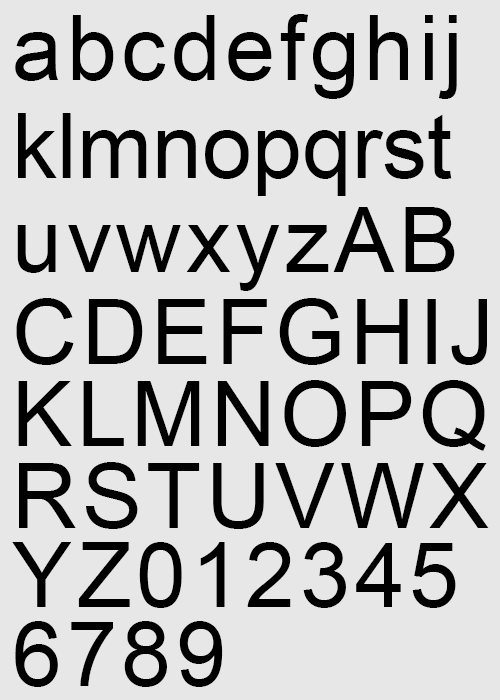
<style>
.page{position:relative;width:500px;height:700px;background:#e7e7e7}
.page>*{position:absolute;margin:0}
.t1{font:90px "ArialMT";letter-spacing:0.05em;color:#000000}
.t2{font:90px "ArialMT";color:#000000}
.t3{font:90px "ArialMT";letter-spacing:0.05em;color:#010101}
</style>
<div class="page">
<p class="t1" style="left:15px;top:14px;width:442px;height:85px">abcdefghij</p>
<p class="t2" style="left:18px;top:113px;width:434px;height:83px">klmnopqrst</p>
<p class="t1" style="left:17px;top:207px;width:438px;height:84px">uvwxyzAB</p>
<p class="t1" style="left:16px;top:298px;width:471px;height:67px">CDEFGHIJ</p>
<p class="t1" style="left:18px;top:380px;width:468px;height:71px">KLMNOPQ</p>
<p class="t3" style="left:19px;top:462px;width:470px;height:67px">RSTUVWX</p>
<p class="t1" style="left:12px;top:542px;width:444px;height:66px">YZ012345</p>
<p class="t1" style="left:15px;top:621px;width:208px;height:66px">6789</p>
</div>
